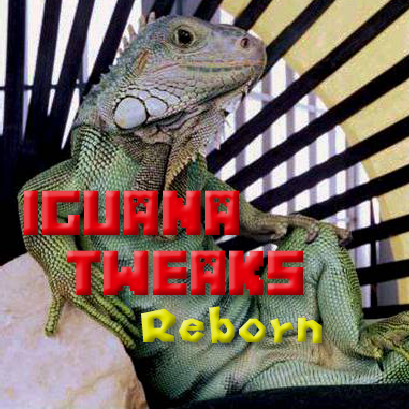
<style>
.page{position:relative;width:409px;height:409px}
.page>*{position:absolute;margin:0}
.t1{font:56.5px "Minecrafter"}
.t2{font:56.5px "MarioKartWiiPlacementRegular"}
</style>
<div class="page">
<p class="t1" style="left:24px;top:190px;width:215px;height:45px">Iguana</p>
<p class="t1" style="left:66px;top:250px;width:237px;height:45px">Tweaks</p>
<p class="t2" style="left:141px;top:306px;width:181px;height:37px">Reborn</p>
</div>
